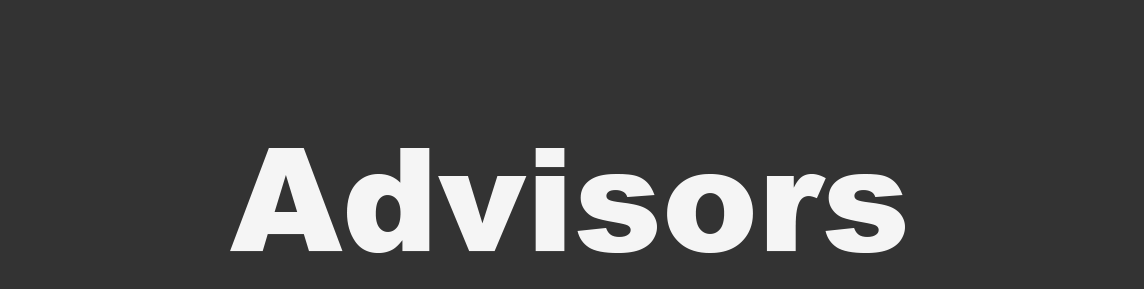
<style>
.page{position:relative;width:1144px;height:289px;background:#333333}
.page>*{position:absolute;margin:0}
.t1{font:144px "Arial-Black";color:#f5f5f5}
</style>
<div class="page">
<p class="t1" style="left:230px;top:148px;width:675px;height:105px">Advisors</p>
</div>
